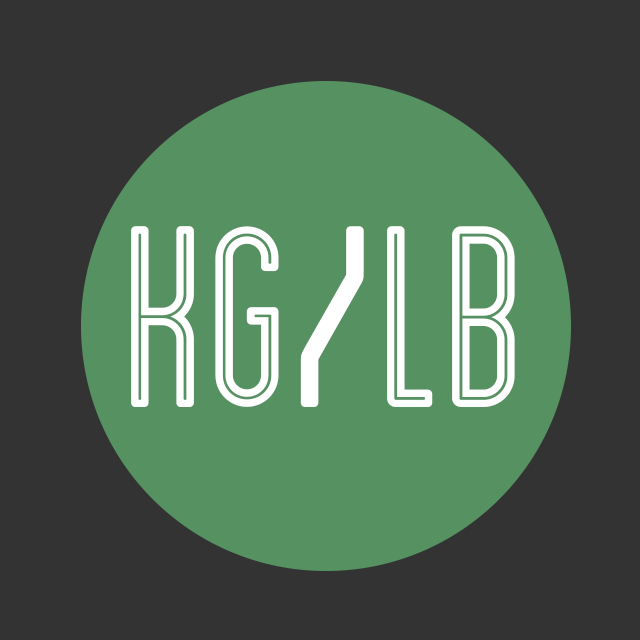
<style>
.page{position:relative;width:640px;height:640px;background:#333333}
.page>*{position:absolute;margin:0}
.t1{font:271.7px "Blanch-CondensedInline";color:#ffffff}
.t2{font:271.7px "Blanch-Condensed";color:#ffffff}
</style>
<div class="page">
<p class="t1" style="left:131px;top:226px;width:384px;height:181px">kg<span class="t2">/</span>lb</p>
</div>
